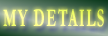
<style>
.page{position:relative;width:108px;height:36px}
.page>*{position:absolute;margin:0}
.t1{font:25.2px "Garamond-Bold";letter-spacing:0.1em;scale:0.57 1}
</style>
<div class="page">
<p class="t1" style="left:3px;top:8px;width:101px;height:19px">MY DETAILS</p>
</div>
